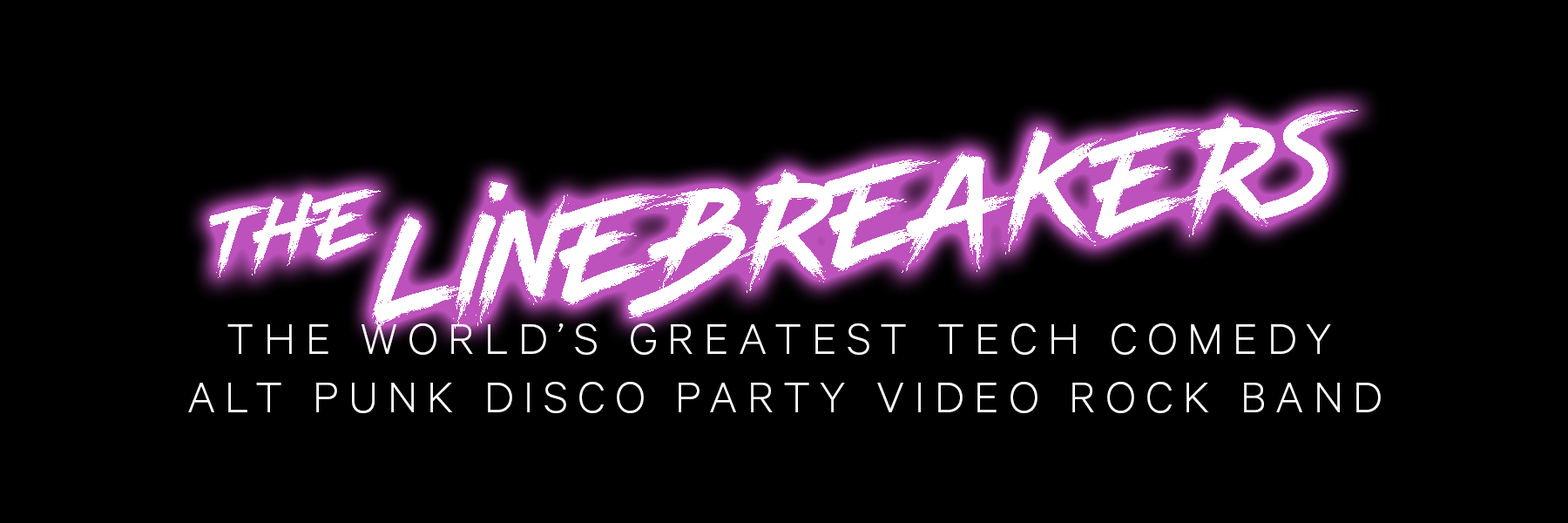
<style>
.page{position:relative;width:1568px;height:523px;background:#000000}
.page>*{position:absolute;margin:0}
.t1{font:136.8px "Kungfont-Regular";color:#ffffff}
.t2{font:86.2px "Kungfont-Regular";color:#ffffff}
.t3{font:48.8px "Calibre-Light";letter-spacing:0.2em;color:#ffffff}
</style>
<div class="page">
<p class="t1" style="left:209px;top:110px;width:1149px;height:218px;rotate:-7deg"><span class="t2">THE</span>LINEBREAKERS</p>
<p class="t3" style="left:188px;top:323px;width:1193px;height:90px;text-align:center">THE WORLD’S GREATEST TECH COMEDY <br>ALT PUNK DISCO PARTY VIDEO ROCK BAND</p>
</div>
